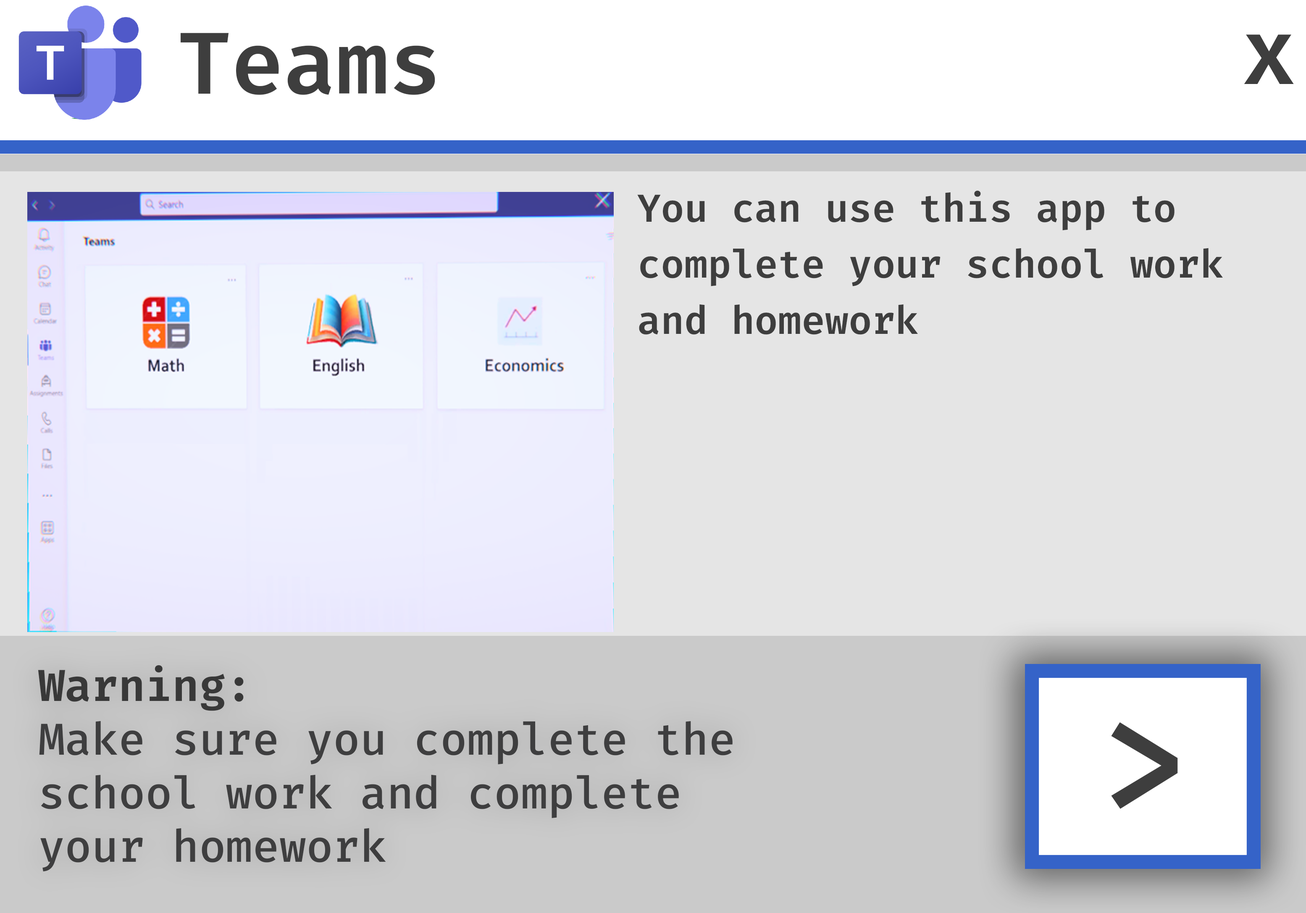
<style>
.page{position:relative;width:1306px;height:913px;background:#e5e5e5}
.page>*{position:absolute;margin:0}
.t1{font:87.7px "FiraCode-SemiBold";color:#3e3e3e}
.t2{font:93.4px "FiraCode_588.000wght";color:#3e3e3e}
.t3{font:39.1px/56px "FiraCode_588.000wght";color:#3e3e3e}
.t4{font:44.7px "FiraCode_495.000wght";color:#3e3e3f}
.t5{font:44.7px "FiraCode_621.000wght";color:#383838}
.t6{font:148.8px "FiraCode_574.000wght";color:#3e3e3e}
</style>
<div class="page">
<p class="t1" style="left:180px;top:33px;width:255px;height:62px">Teams</p>
<p class="t2" style="left:1244px;top:34px;width:50px;height:50px">x</p>
<p class="t3" style="left:637px;top:191px;width:586px;height:144px">You can use this app to<br>complete your school work<br>and homework</p>
<p class="t4" style="left:38px;top:665px;width:695px;height:207px"><span class="t5">Warning:<br></span>Make sure you complete the<br>school work and complete<br>your homework</p>
<p class="t6" style="left:1111px;top:722px;width:67px;height:87px">&gt;</p>
</div>
